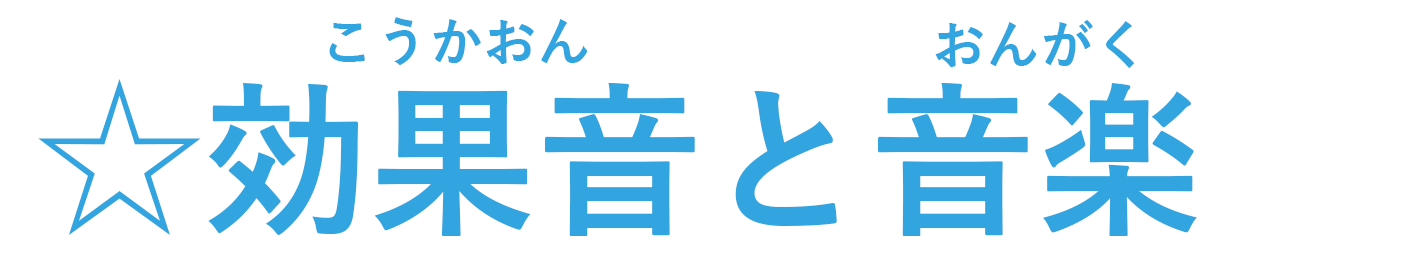
<style>
.page{position:relative;width:1406px;height:261px;background:#ffffff}
.page>*{position:absolute;margin:0}
.t1{font:54.2px "YuGothic-Bold";color:#32a4df}
.t2{font:166.7px "YuGothic-Bold";color:#32a4df}
</style>
<div class="page">
<p class="t1" style="left:329px;top:17px;width:259px;height:48px">こうかおん</p>
<p class="t1" style="left:935px;top:20px;width:199px;height:48px">おんがく</p>
<p class="t2" style="left:38px;top:79px;width:1159px;height:157px">☆効果音と音楽</p>
</div>
